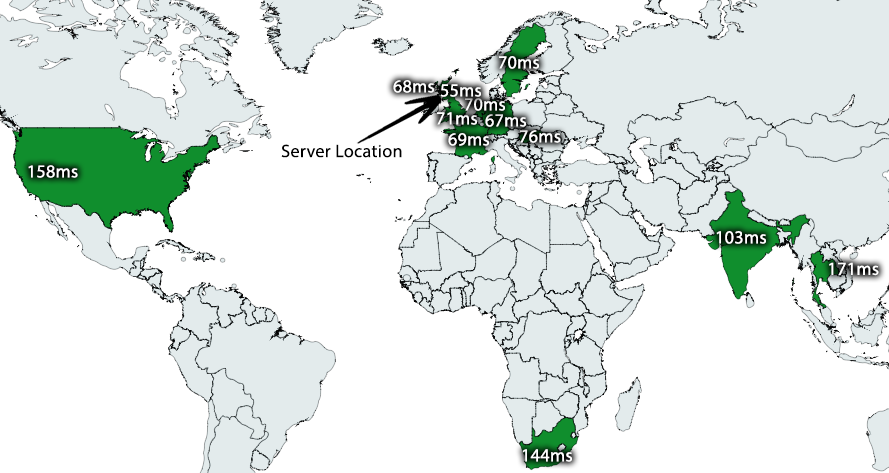
<style>
.page{position:relative;width:889px;height:473px;background:#ffffff}
.page>*{position:absolute;margin:0}
.t1{font:18.4px "MyriadPro-Regular";letter-spacing:0.02em;color:#ffffff}
.t2{font:18px "MyriadPro-Regular";letter-spacing:0.02em;color:#000000}
.t3{font:18px "MyriadPro-Regular";letter-spacing:0.02em;color:#ffffff}
</style>
<div class="page">
<p class="t1" style="left:499px;top:56px;width:40px;height:13px">70ms</p>
<p class="t1" style="left:393px;top:80px;width:41px;height:13px">68ms</p>
<p class="t1" style="left:440px;top:84px;width:41px;height:13px">55ms</p>
<p class="t1" style="left:465px;top:98px;width:40px;height:13px">70ms</p>
<p class="t1" style="left:437px;top:112px;width:40px;height:13px">71ms</p>
<p class="t1" style="left:485px;top:114px;width:41px;height:13px">67ms</p>
<p class="t1" style="left:448px;top:133px;width:41px;height:13px">69ms</p>
<p class="t1" style="left:520px;top:130px;width:41px;height:13px">76ms</p>
<p class="t2" style="left:281px;top:144px;width:121px;height:14px">Server Location</p>
<p class="t3" style="left:28px;top:165px;width:50px;height:13px">158ms</p>
<p class="t1" style="left:716px;top:231px;width:50px;height:13px">103ms</p>
<p class="t1" style="left:829px;top:262px;width:50px;height:14px">171ms</p>
<p class="t1" style="left:522px;top:449px;width:50px;height:13px">144ms</p>
</div>
